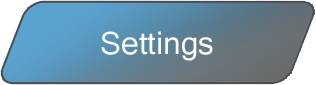
<style>
.page{position:relative;width:316px;height:85px}
.page>*{position:absolute;margin:0}
.t1{font:34px "Shruti";color:#ffffff}
</style>
<div class="page">
<p class="t1" style="left:101px;top:31px;width:112px;height:30px">Settings</p>
</div>
